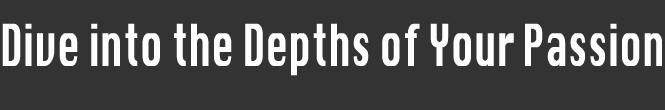
<style>
.page{position:relative;width:665px;height:110px;background:#333333}
.page>*{position:absolute;margin:0}
.t1{font:55.8px "Silom";color:#fefefe;scale:0.61 1}
</style>
<div class="page">
<p class="t1" style="left:2px;top:23px;width:660px;height:53px">Dive into the Depths of Your Passion</p>
</div>
